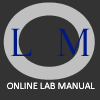
<style>
.page{position:relative;width:100px;height:100px;background:#333333}
.page>*{position:absolute;margin:0}
.t1{font:100px "Biondi";color:#c0c0c0}
.t2{font:40px "EuroRoman";color:#001983}
.t3{font:10px "Calibri";color:#ffffff}
</style>
<div class="page">
<p class="t1" style="left:3px;top:2px;width:92px;height:78px">O</p>
<p class="t2" style="left:11px;top:28px;width:21px;height:28px">L</p>
<p class="t2" style="left:57px;top:28px;width:33px;height:28px">M</p>
<p class="t3" style="left:7px;top:82px;width:88px;height:7px">ONLINE LAB MANUAL</p>
</div>
